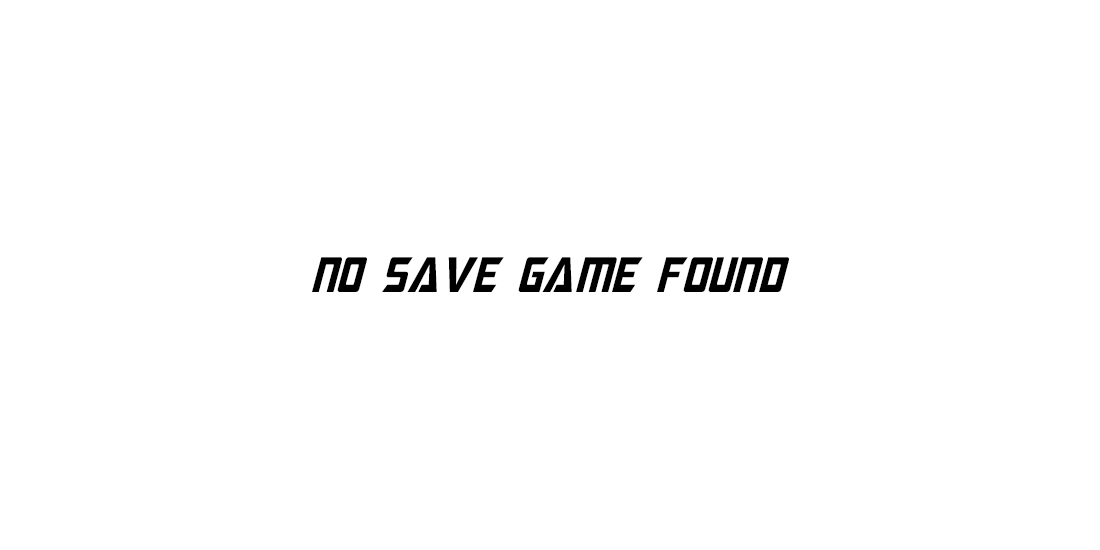
<style>
.page{position:relative;width:1100px;height:550px;background:#ffffff}
.page>*{position:absolute;margin:0}
.t1{font:12px "MegatronCondensed-Italic";color:#000000}
</style>
<div class="page">
<p class="t1" style="left:312px;top:257px;width:477px;height:35px">no save game found</p>
</div>
